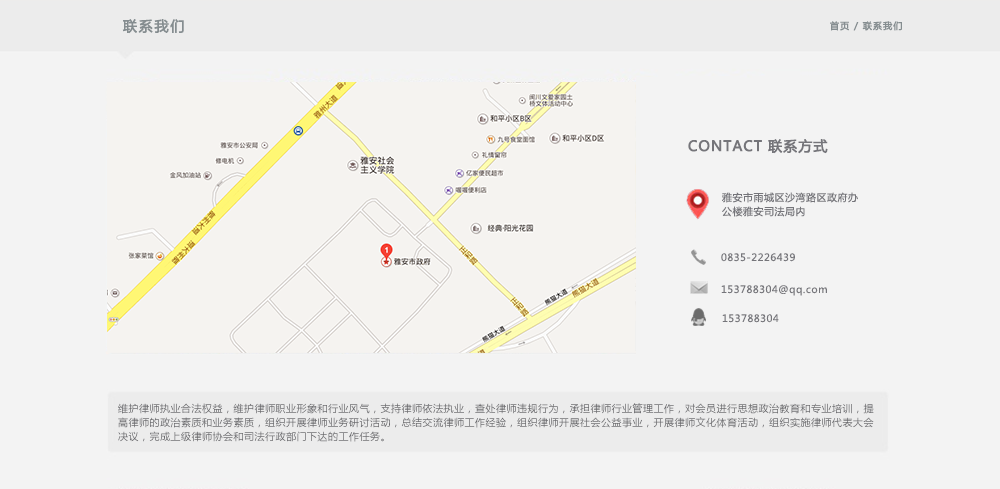
<style>
.page{position:relative;width:1000px;height:489px;background:#f3f3f3}
.page>*{position:absolute;margin:0}
.t1{font:14px "MicrosoftYaHei";letter-spacing:0.1em;color:#858d90;font-weight:bold}
.t2{font:9px "MicrosoftYaHei";letter-spacing:0.1em;color:#858d90;font-weight:bold}
.t3{font:14px "MicrosoftYaHei";letter-spacing:0.05em;color:#75757a;font-weight:bold}
.t4{font:10px/14px "MicrosoftYaHei";letter-spacing:0.05em;color:#75757a}
.t5{font:10px "MicrosoftYaHei";letter-spacing:0.05em;color:#75757a}
.t6{font:10px/14px "MicrosoftYaHei";letter-spacing:0.05em;color:#6a6a6d}
</style>
<div class="page">
<p class="t1" style="left:122px;top:19px;width:62px;height:15px">联系我们</p>
<p class="t2" style="left:830px;top:21px;width:72px;height:10px">首页 / 联系我们</p>
<p class="t3" style="left:688px;top:139px;width:140px;height:15px">CONTACT 联系方式</p>
<p class="t4" style="left:722px;top:192px;width:136px;height:25px">雅安市雨城区沙湾路区政府办<br>公楼雅安司法局内</p>
<p class="t5" style="left:721px;top:253px;width:74px;height:9px">0835-2226439</p>
<p class="t5" style="left:721px;top:285px;width:106px;height:11px">153788304@qq.com</p>
<p class="t5" style="left:722px;top:314px;width:57px;height:9px">153788304</p>
<p class="t6" style="left:118px;top:403px;width:756px;height:39px">维护律师执业合法权益，维护律师职业形象和行业风气，支持律师依法执业，查处律师违规行为，承担律师行业管理工作，对会员进行思想政治教育和专业培训，提<br>高律师的政治素质和业务素质，组织开展律师业务研讨活动，总结交流律师工作经验，组织律师开展社会公益事业，开展律师文化体育活动，组织实施律师代表大会<br>决议，完成上级律师协会和司法行政部门下达的工作任务。</p>
</div>
